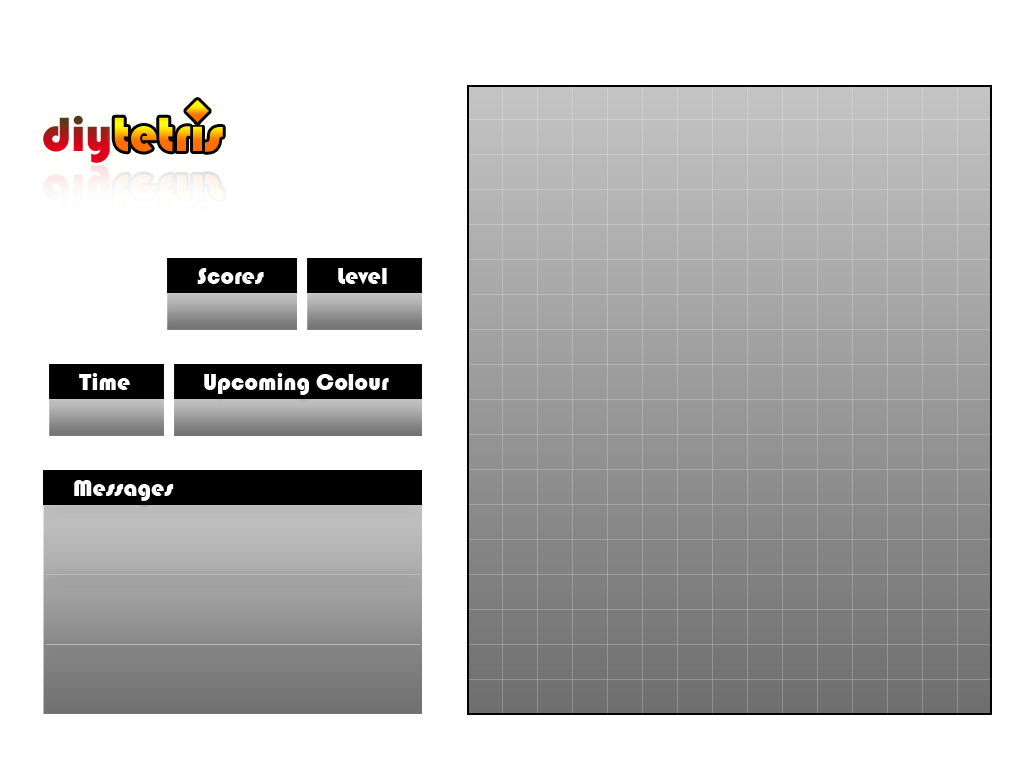
<style>
.page{position:relative;width:1024px;height:768px;background:#ffffff}
.page>*{position:absolute;margin:0}
.t1{font:24px "Bauhaus93";color:#ffffff}
</style>
<div class="page">
<p class="t1" style="left:197px;top:268px;width:67px;height:16px">Scores</p>
<p class="t1" style="left:338px;top:268px;width:49px;height:17px">Level</p>
<p class="t1" style="left:79px;top:373px;width:51px;height:17px">Time</p>
<p class="t1" style="left:204px;top:373px;width:185px;height:22px">Upcoming Colour</p>
<p class="t1" style="left:74px;top:480px;width:100px;height:21px">Messages</p>
</div>
